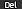
<style>
.page{position:relative;width:22px;height:9px;background:#333333}
.page>*{position:absolute;margin:0}
.t1{font:8px "KohinoorBangla-Regular";color:#ffffff}
</style>
<div class="page">
<p class="t1" style="left:5px;top:1px;width:12px;height:7px">Del</p>
</div>
